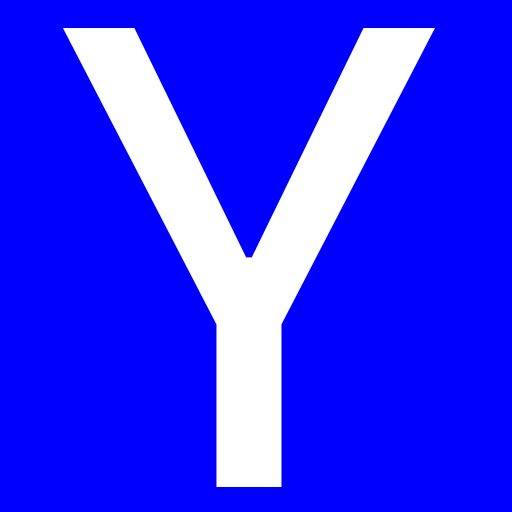
<style>
.page{position:relative;width:512px;height:512px;background:#0000ff}
.page>*{position:absolute;margin:0}
.t1{font:662.2px "CascadiaMono-Roman";color:#ffffff}
</style>
<div class="page">
<p class="t1" style="left:63px;top:28px;width:372px;height:459px">Y</p>
</div>
